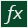
<style>
.page{position:relative;width:28px;height:28px;background:#0a482a}
.page>*{position:absolute;margin:0}
.t1{font:20px "Corbel-Italic";color:#e2f0e9}
</style>
<div class="page">
<p class="t1" style="left:4px;top:5px;width:19px;height:19px">fx</p>
</div>
